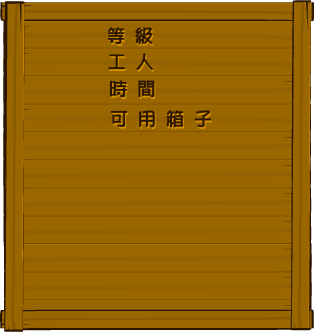
<style>
.page{position:relative;width:314px;height:332px;background:#996600}
.page>*{position:absolute;margin:0}
.t1{font:18px "Pop2EG-Bold-T-GB";color:#2e1700;font-weight:bold}
</style>
<div class="page">
<p class="t1" style="left:107px;top:27px;width:46px;height:18px">等 级</p>
<p class="t1" style="left:108px;top:53px;width:45px;height:17px">工 人</p>
<p class="t1" style="left:109px;top:80px;width:46px;height:18px">时 间</p>
<p class="t1" style="left:110px;top:110px;width:102px;height:18px">可 用 箱 子</p>
</div>
